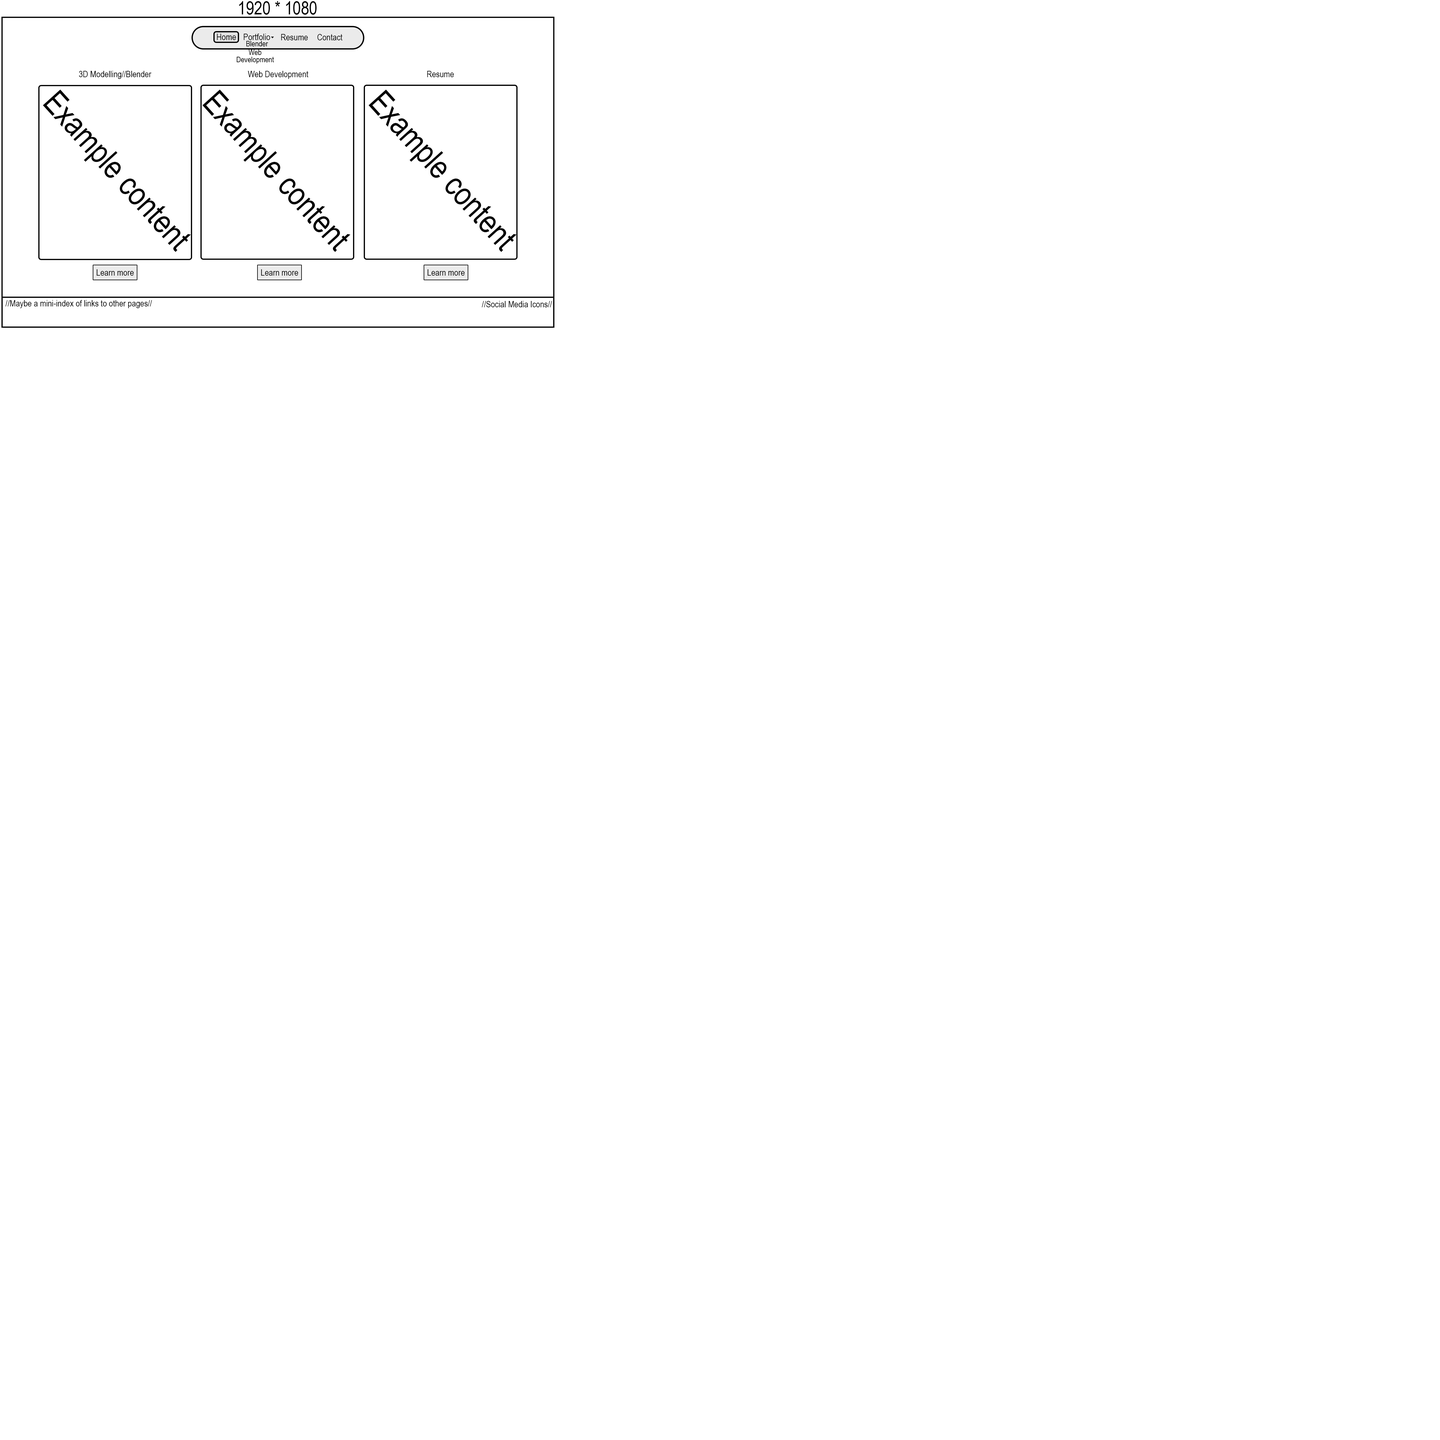
<style>
.page{position:relative;width:1440px;height:1440px;background:#ffffff}
.page>*{position:absolute;margin:0}
.t1{font:18px "ArialNarrow";color:#000000}
.t2{font:9px "ArialNarrow";color:#000000}
.t3{font:7.8px "ArialNarrow";color:#000000}
.t4{font:7.8px/7.2px "ArialNarrow";color:#000000}
.t5{font:32.8px "ArialNarrow";color:#000000}
</style>
<div class="page">
<p class="t1" style="left:239px;top:1px;width:78px;height:14px">1920 * 1080</p>
<p class="t2" style="left:217px;top:34px;width:19px;height:6px">Home</p>
<p class="t2" style="left:244px;top:34px;width:26px;height:6px">Portfolio</p>
<p class="t3" style="left:246px;top:41px;width:22px;height:5px">Blender</p>
<p class="t2" style="left:281px;top:34px;width:27px;height:6px">Resume</p>
<p class="t2" style="left:317px;top:34px;width:25px;height:6px">Contact</p>
<p class="t4" style="left:237px;top:50px;width:37px;height:14px;text-align:center">Web<br>Development</p>
<p class="t2" style="left:79px;top:71px;width:72px;height:8px">3D Modelling//Blender</p>
<p class="t2" style="left:248px;top:71px;width:60px;height:8px">Web Development</p>
<p class="t2" style="left:427px;top:71px;width:27px;height:6px">Resume</p>
<p class="t5" style="left:43px;top:90px;width:148px;height:162px;rotate:48deg">Example content</p>
<p class="t5" style="left:202px;top:90px;width:148px;height:162px;rotate:48deg">Example content</p>
<p class="t5" style="left:369px;top:90px;width:148px;height:162px;rotate:48deg">Example content</p>
<p class="t2" style="left:96px;top:269px;width:38px;height:7px">Learn more</p>
<p class="t2" style="left:261px;top:269px;width:37px;height:7px">Learn more</p>
<p class="t2" style="left:427px;top:269px;width:38px;height:7px">Learn more</p>
<p class="t2" style="left:5px;top:300px;width:147px;height:8px">//Maybe a mini-index of links to other pages//</p>
<p class="t2" style="left:482px;top:301px;width:70px;height:6px">//Social Media Icons//</p>
</div>
